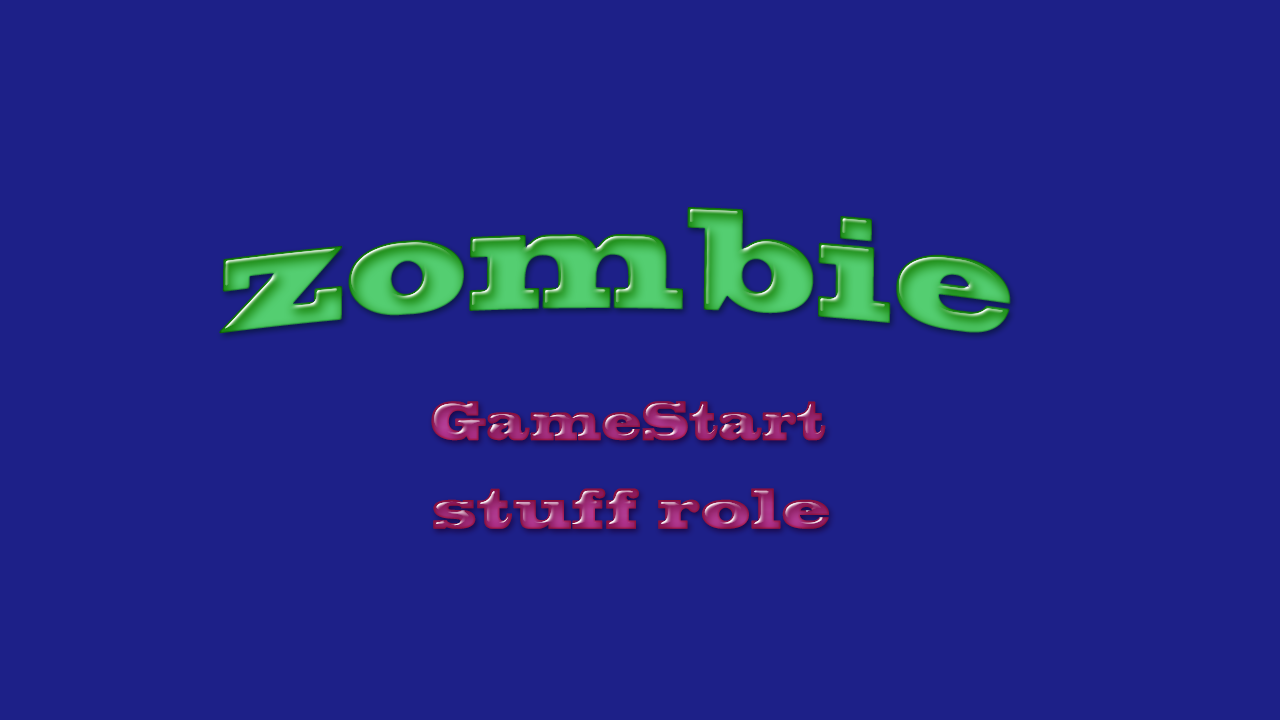
<style>
.page{position:relative;width:1280px;height:720px;background:#1d2088}
.page>*{position:absolute;margin:0}
.t1{font:136.4px "BlackoakStd";scale:0.67 1}
.t2{font:52.1px "BlackoakStd";scale:0.58 1}
.t3{font:53.8px "BlackoakStd";scale:0.69 1}
</style>
<div class="page">
<p class="t1" style="left:219px;top:207px;width:792px;height:127px">zombie</p>
<p class="t2" style="left:431px;top:401px;width:395px;height:40px">GameStart</p>
<p class="t3" style="left:433px;top:488px;width:396px;height:41px">stuff role</p>
</div>
